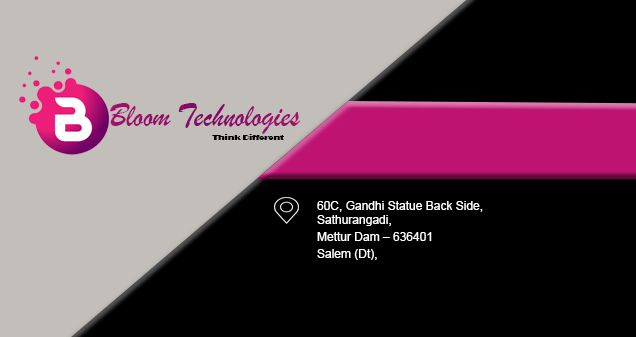
<style>
.page{position:relative;width:636px;height:337px;background:#000000}
.page>*{position:absolute;margin:0}
.t1{font:35.2px "BrushScriptMT";color:#920969;scale:0.88 1}
.t2{font:7.2px "Broadway";color:#000000;scale:1.2 1}
.t3{font:12px "ArialMT";color:#ffffff}
.t4{font:12px/8.4px "ArialMT";color:#ffffff}
</style>
<div class="page">
<p class="t1" style="left:110px;top:103px;width:191px;height:31px">Bloom Technologies</p>
<p class="t2" style="left:212px;top:134px;width:72px;height:6px">Think Different</p>
<p class="t3" style="left:317px;top:201px;width:166px;height:59px">60C, Gandhi Statue Back Side,<br>Sathurangadi,<br><span class="t4">    <br>Mettur Dam – 636401<br><br>Salem (Dt),</span></p>
</div>
